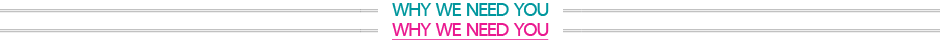
<style>
.page{position:relative;width:940px;height:40px;background:#ffffff}
.page>*{position:absolute;margin:0}
.t1{font:20px "MyriadWebPro";letter-spacing:-0.075em;color:#00979d}
.t2{font:20px "MyriadWebPro";letter-spacing:-0.075em;color:#ea198f;text-decoration:underline}
</style>
<div class="page">
<p class="t1" style="left:392px;top:3px;width:157px;height:13px">WHY  WE  NEED  YOU</p>
<p class="t2" style="left:392px;top:23px;width:157px;height:18px">WHY  WE  NEED  YOU</p>
</div>
